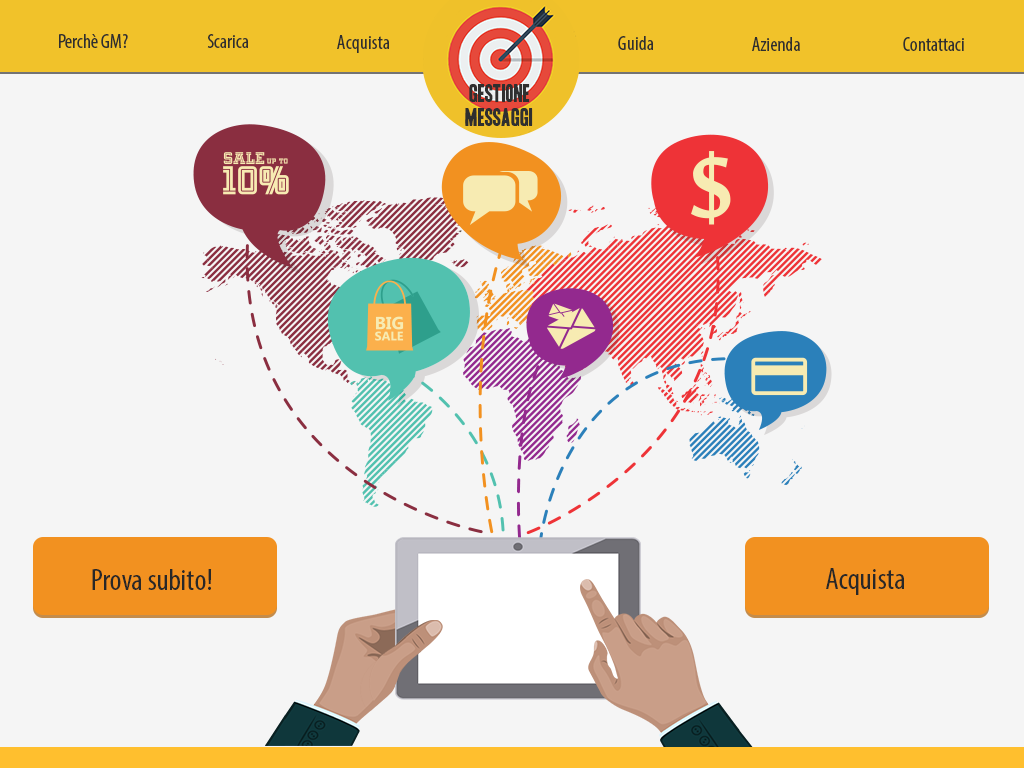
<style>
.page{position:relative;width:1024px;height:768px;background:#f5f5f5}
.page>*{position:absolute;margin:0}
.t1{font:20px "MyriadPro-Cond";color:#2f2f2f}
.t2{font:22px/23.7px "HeadlineOneHPLHS";color:#2f2f2f}
.t3{font:31px "MyriadPro-Cond";color:#282828}
</style>
<div class="page">
<p class="t1" style="left:59px;top:34px;width:69px;height:14px">Perchè GM?</p>
<p class="t1" style="left:207px;top:34px;width:41px;height:14px">Scarica</p>
<p class="t1" style="left:337px;top:35px;width:52px;height:18px">Acquista</p>
<p class="t1" style="left:618px;top:36px;width:35px;height:14px">Guida</p>
<p class="t1" style="left:752px;top:37px;width:48px;height:14px">Azienda</p>
<p class="t1" style="left:903px;top:37px;width:61px;height:14px">Contattaci</p>
<p class="t2" style="left:465px;top:84px;width:68px;height:42px">GESTIONE<br>MESSAGGI</p>
<p class="t3" style="left:92px;top:569px;width:120px;height:21px">Prova subito!</p>
<p class="t3" style="left:826px;top:568px;width:78px;height:27px">Acquista</p>
</div>
